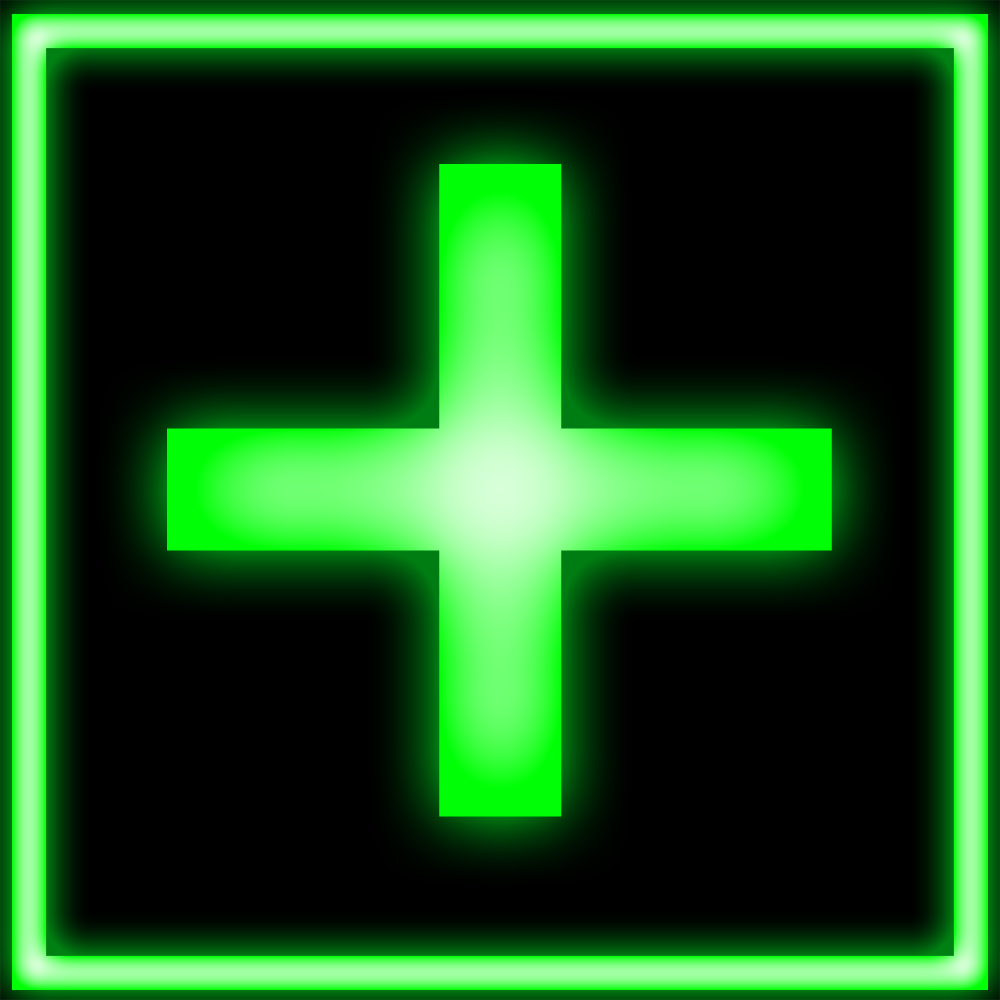
<style>
.page{position:relative;width:1000px;height:1000px;background:#000000}
.page>*{position:absolute;margin:0}
.t1{font:1557px "EstrangeloEdessa";letter-spacing:0.025em}
</style>
<div class="page">
<p class="t1" style="left:167px;top:164px;width:665px;height:653px">+</p>
</div>
